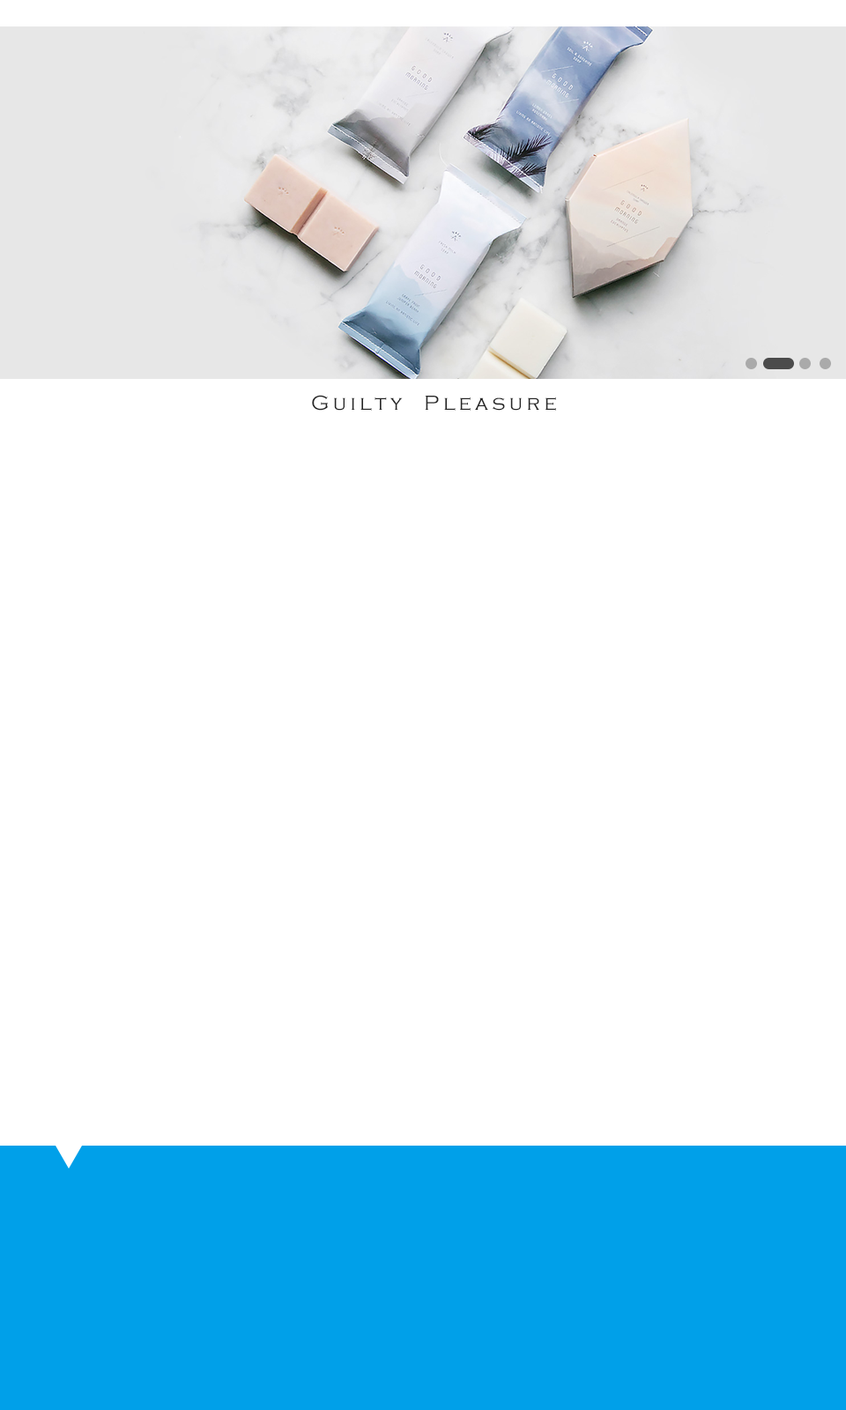
<style>
.page{position:relative;width:846px;height:1410px;background:#ffffff}
.page>*{position:absolute;margin:0}
.t1{font:21.1px "CopperplateGothic-Light";letter-spacing:0.18em;color:#262626}
</style>
<div class="page">
<p class="t1" style="left:312px;top:395px;width:244px;height:16px">Guilty  Pleasure</p>
</div>
